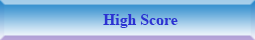
<style>
.page{position:relative;width:255px;height:40px}
.page>*{position:absolute;margin:0}
.t1{font:15.8px "TimesNewRomanPS-BoldMT";color:#2c32d2}
</style>
<div class="page">
<p class="t1" style="left:103px;top:14px;width:75px;height:14px">High Score</p>
</div>
